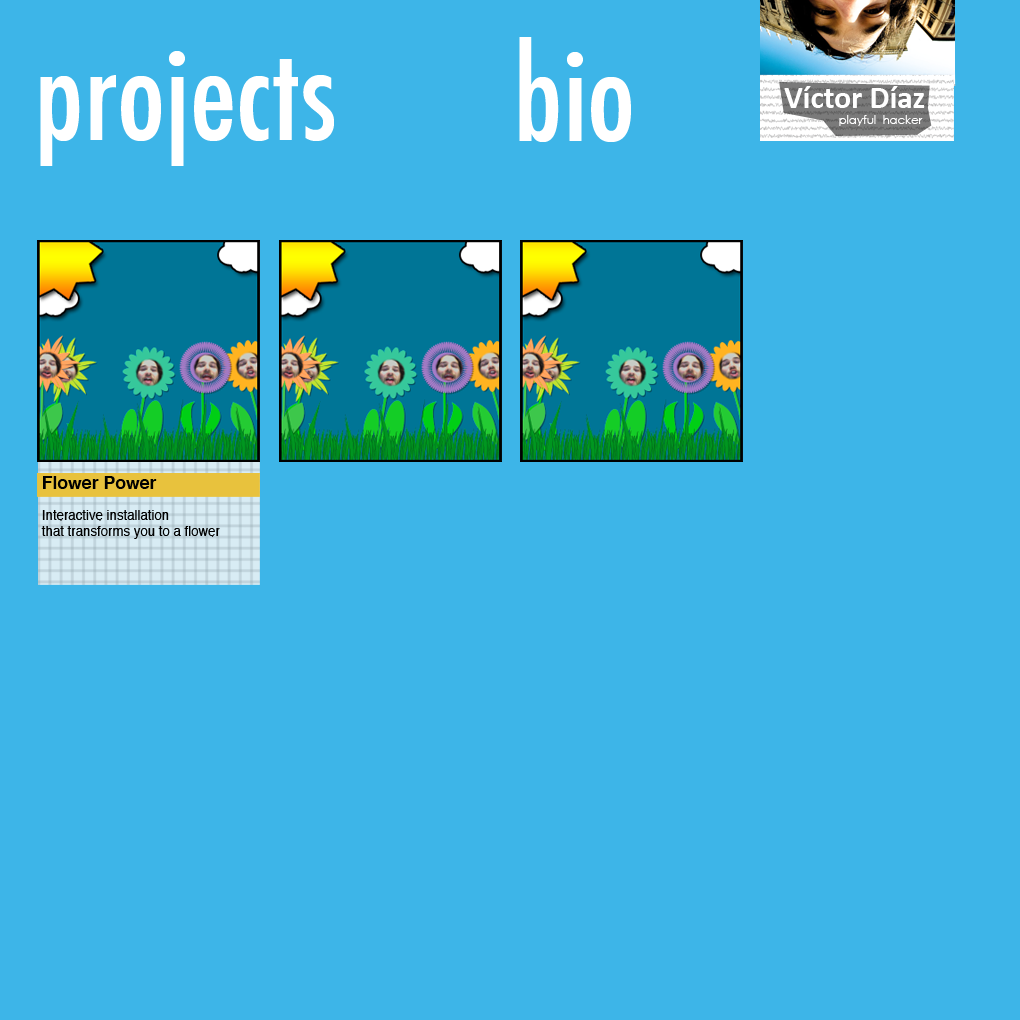
<style>
.page{position:relative;width:1020px;height:1020px;background:#3db5e8}
.page>*{position:absolute;margin:0}
.t1{font:125px "Futura-CondensedMedium";color:#ffffff}
.t2{font:31.5px "Calibri-Bold";color:#ffffff}
.t3{font:11.7px "CenturyGothic";color:#ffffff}
.t4{font:17.6px "Helvetica-Bold";color:#000000}
.t5{font:13.2px "Helvetica";color:#000000}
</style>
<div class="page">
<p class="t1" style="left:519px;top:37px;width:112px;height:105px">bio</p>
<p class="t1" style="left:40px;top:51px;width:294px;height:115px">projects</p>
<p class="t2" style="left:784px;top:86px;width:141px;height:22px">Víctor Díaz</p>
<p class="t3" style="left:839px;top:115px;width:84px;height:11px">playful  hacker</p>
<p class="t4" style="left:43px;top:476px;width:114px;height:13px">Flower Power</p>
<p class="t5" style="left:41px;top:510px;width:179px;height:29px">Interactive installation <br>that transforms you to a flower</p>
</div>
